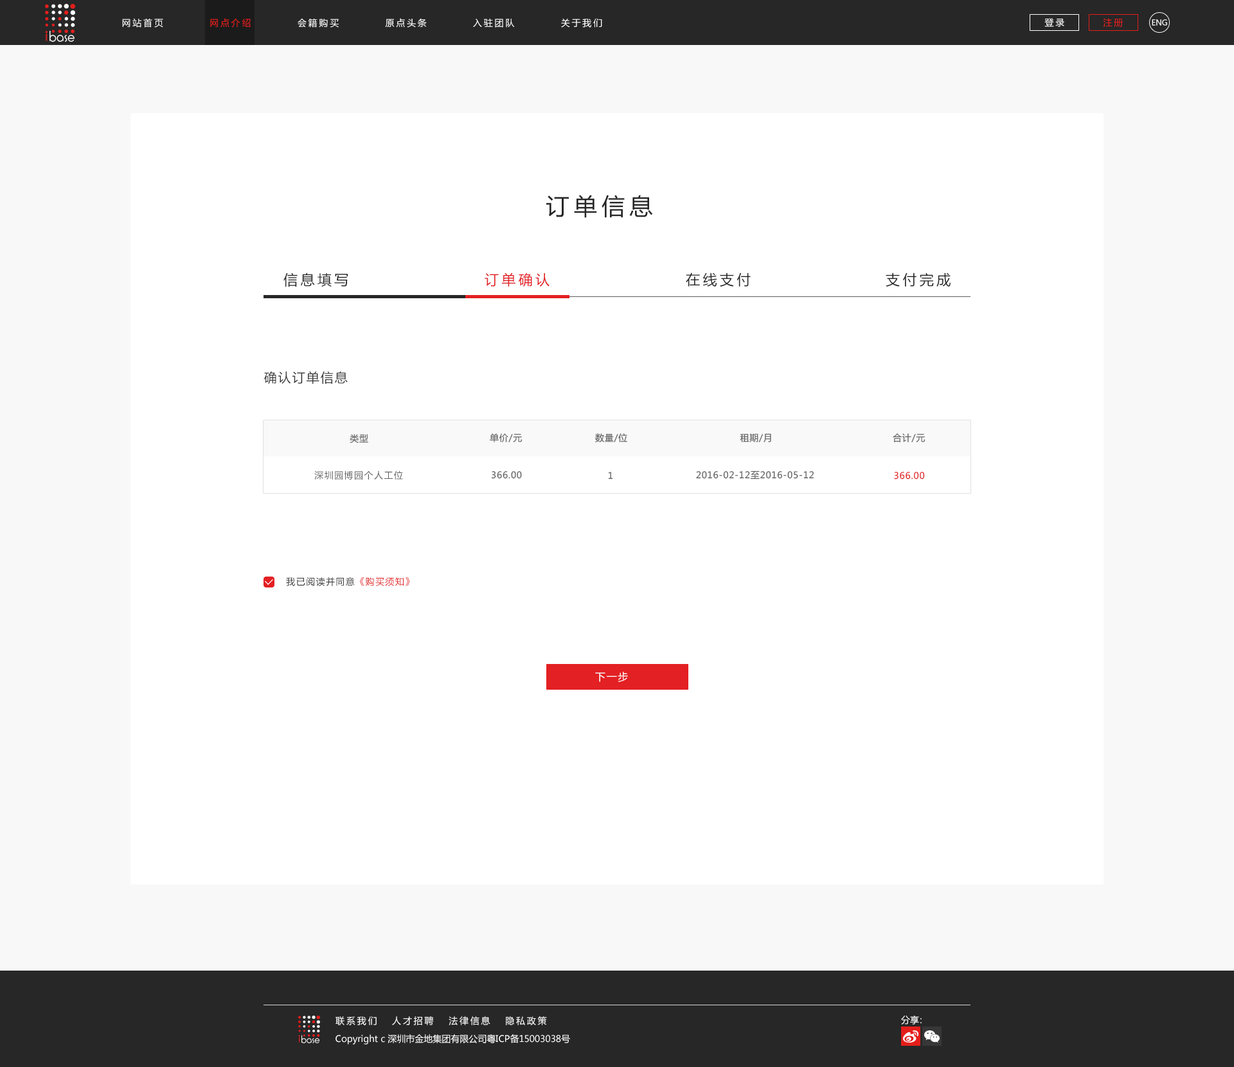
<style>
.page{position:relative;width:1234px;height:1067px;background:#ffffff}
.page>*{position:absolute;margin:0}
.t1{font:9px "MicrosoftYaHei";letter-spacing:0.2em;color:#ffffff}
.t2{font:9px "MicrosoftYaHei";letter-spacing:0.2em;color:#e41e1b}
.t3{font:7.7px "MicrosoftYaHei";letter-spacing:-0.01em;color:#ffffff}
.t4{font:23.1px "MicrosoftYaHei";letter-spacing:0.2em;color:#272727;text-transform:uppercase}
.t5{font:14.1px "MicrosoftYaHei";letter-spacing:0.2em;color:#272727;text-transform:uppercase}
.t6{font:14.1px "MicrosoftYaHei";letter-spacing:0.2em;color:#e32023;text-transform:uppercase}
.t7{font:12.9px "MicrosoftYaHei";letter-spacing:0.1em;color:#373737;text-transform:uppercase}
.t8{font:9px "MicrosoftYaHei";letter-spacing:0.05em;color:#5e5e5e;text-transform:uppercase}
.t9{font:9px "MicrosoftYaHei";letter-spacing:0.1em;color:#5e5e5e;text-transform:uppercase}
.t10{font:9px "MicrosoftYaHei";letter-spacing:0.05em;color:#e32023;text-transform:uppercase}
.t11{font:9px "MicrosoftYaHei";letter-spacing:0.1em;color:#373737;text-transform:uppercase}
.t12{font:9px "MicrosoftYaHei";letter-spacing:0.1em;color:#e32023;text-transform:uppercase}
.t13{font:10.3px "MicrosoftYaHei";letter-spacing:0.1em;color:#ffffff;text-transform:uppercase}
.t14{font:9px "MicrosoftYaHei";letter-spacing:-0.3em;color:#ffffff}
.t15{font:9px "MicrosoftYaHei";color:#ffffff}
</style>
<div class="page">
<p class="t1" style="left:122px;top:18px;width:480px;height:10px">网站首页          <span class="t2">网点介绍</span>          会籍购买          原点头条          入驻团队          关于我们</p>
<p class="t1" style="left:1045px;top:18px;width:20px;height:9px">登录</p>
<p class="t2" style="left:1103px;top:18px;width:20px;height:9px">注册</p>
<p class="t3" style="left:1152px;top:19px;width:15px;height:7px">ENG</p>
<p class="t4" style="left:546px;top:195px;width:107px;height:23px">订单信息</p>
<p class="t5" style="left:284px;top:273px;width:64px;height:14px">信息填写</p>
<p class="t6" style="left:485px;top:273px;width:65px;height:14px">订单确认</p>
<p class="t5" style="left:686px;top:273px;width:65px;height:14px">在线支付</p>
<p class="t5" style="left:886px;top:273px;width:65px;height:14px">支付完成</p>
<p class="t7" style="left:264px;top:371px;width:84px;height:13px">确认订单信息</p>
<p class="t8" style="left:350px;top:434px;width:18px;height:10px">类型</p>
<p class="t8" style="left:490px;top:433px;width:33px;height:10px">单价/元</p>
<p class="t8" style="left:595px;top:433px;width:32px;height:10px">数量/位</p>
<p class="t8" style="left:740px;top:433px;width:31px;height:9px">租期/月</p>
<p class="t8" style="left:893px;top:433px;width:33px;height:10px">合计/元</p>
<p class="t9" style="left:314px;top:471px;width:89px;height:9px">深圳园博园个人工位</p>
<p class="t8" style="left:491px;top:471px;width:31px;height:8px">366.00</p>
<p class="t8" style="left:608px;top:472px;width:5px;height:8px">1</p>
<p class="t8" style="left:696px;top:471px;width:118px;height:9px">2016-02-12至2016-05-12</p>
<p class="t10" style="left:894px;top:472px;width:31px;height:8px">366.00</p>
<p class="t11" style="left:286px;top:577px;width:124px;height:9px">我已阅读并同意<span class="t12">《购买须知》</span></p>
<p class="t13" style="left:595px;top:672px;width:33px;height:10px">下一步</p>
<p class="t1" style="left:336px;top:1016px;width:211px;height:9px">联系我们   人才招聘   法律信息   隐私政策</p>
<p class="t14" style="left:901px;top:1016px;width:21px;height:9px"><span class="t15">分</span>享：</p>
<p class="t15" style="left:336px;top:1034px;width:234px;height:11px">Copyright c 深圳市金地集团有限公司粤ICP备15003038号</p>
</div>
